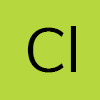
<style>
.page{position:relative;width:100px;height:100px;background:#b7d73e}
.page>*{position:absolute;margin:0}
.t1{font:62.5px "Muli-Regular";color:#000000}
</style>
<div class="page">
<p class="t1" style="left:27px;top:26px;width:49px;height:47px">Cl</p>
</div>
